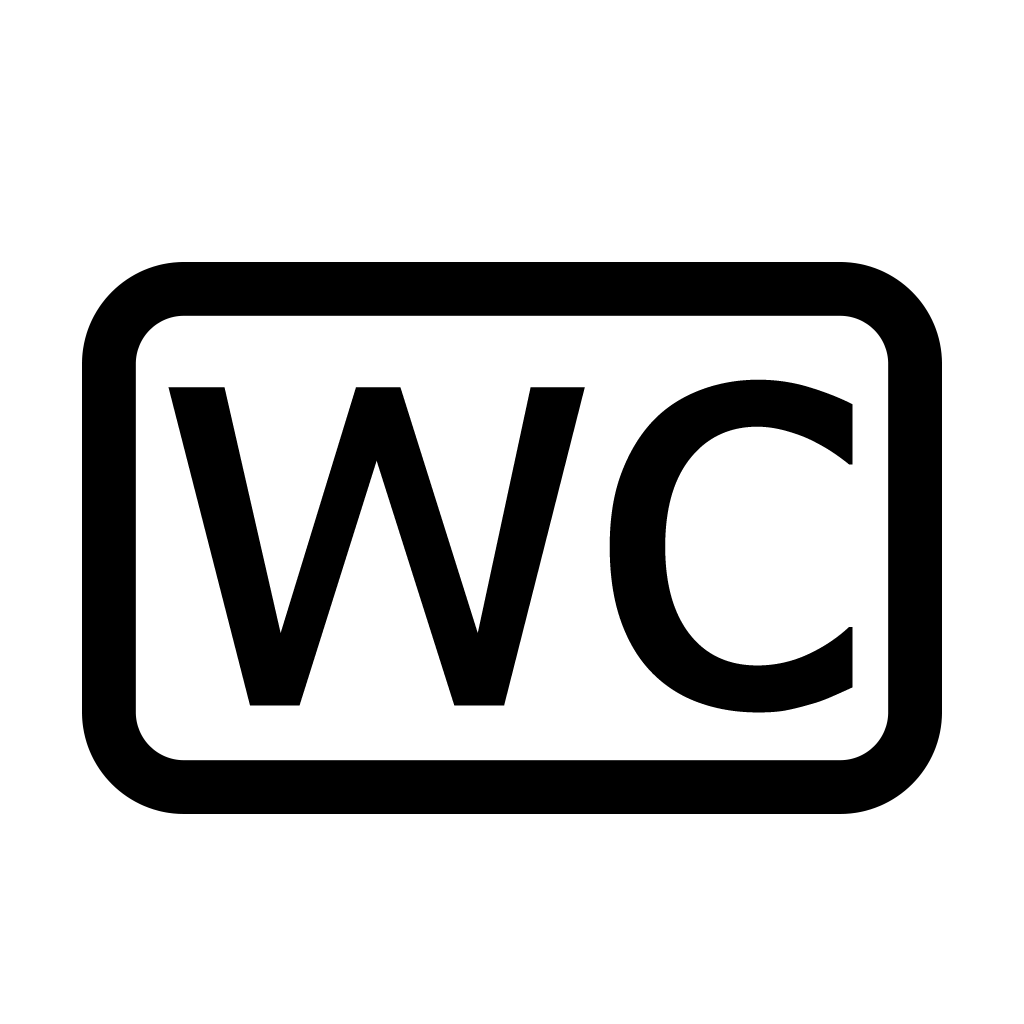
<style>
.page{position:relative;width:1024px;height:1024px;background:#ffffff}
.page>*{position:absolute;margin:0}
.t1{font:583.3px "Tahoma";color:#000000}
</style>
<div class="page">
<p class="t1" style="left:168px;top:379px;width:685px;height:334px">wc</p>
</div>
